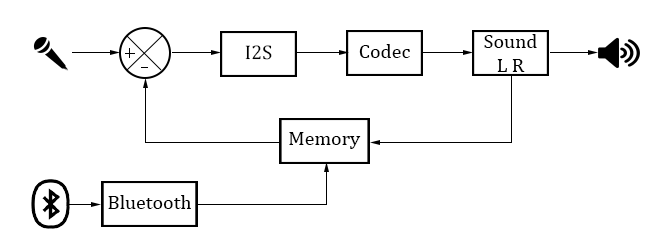
<style>
.page{position:relative;width:655px;height:248px;background:#ffffff}
.page>*{position:absolute;margin:0}
.t1{font:20px "CambriaMath";color:#000000}
.t2{font:19.8px "CambriaMath";color:#000000}
</style>
<div class="page">
<p class="t1" style="left:484px;top:34px;width:53px;height:38px;text-align:center">Sound<br>L R</p>
<p class="t2" style="left:245px;top:45px;width:27px;height:15px">I2S</p>
<p class="t1" style="left:359px;top:44px;width:51px;height:14px">Codec</p>
<p class="t1" style="left:289px;top:132px;width:72px;height:17px">Memory</p>
<p class="t1" style="left:108px;top:195px;width:83px;height:14px">Bluetooth</p>
</div>
